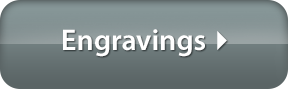
<style>
.page{position:relative;width:288px;height:89px}
.page>*{position:absolute;margin:0}
.t1{font:30px "MyriadPro-Semibold";color:#ffffff}
.t2{font:30px "Webdings";color:#ffffff}
</style>
<div class="page">
<p class="t1" style="left:63px;top:29px;width:164px;height:28px">Engravings<span class="t2">4</span></p>
</div>
